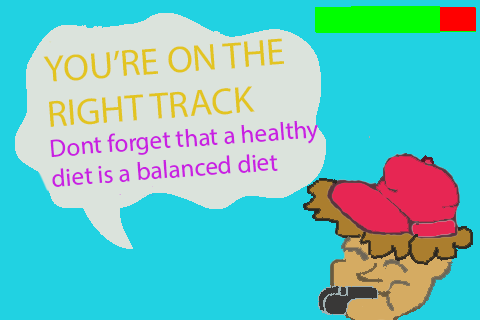
<style>
.page{position:relative;width:480px;height:320px;background:#21d2e2}
.page>*{position:absolute;margin:0}
.t1{font:25px "MyriadHebrew-Regular";color:#c921e2}
.t2{font:37.5px "MyriadHebrew-Regular";color:#e2c421}
</style>
<div class="page">
<p class="t1" style="left:43px;top:38px;width:275px;height:149px;text-align:right;rotate:-4deg"><span class="t2">YOU’RE ON THE RIGHT TRACK<br></span>Dont forget that a healthy diet is a balanced diet</p>
</div>
